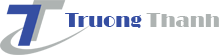
<style>
.page{position:relative;width:220px;height:55px;background:#ffffff}
.page>*{position:absolute;margin:0}
.t1{font:20px "Broadway";color:#354ea2}
.t2{font:20px "Broadway";color:#aeb3b2}
</style>
<div class="page">
<p class="t1" style="left:65px;top:13px;width:154px;height:15px">Truong <span class="t2">Thanh</span></p>
</div>
